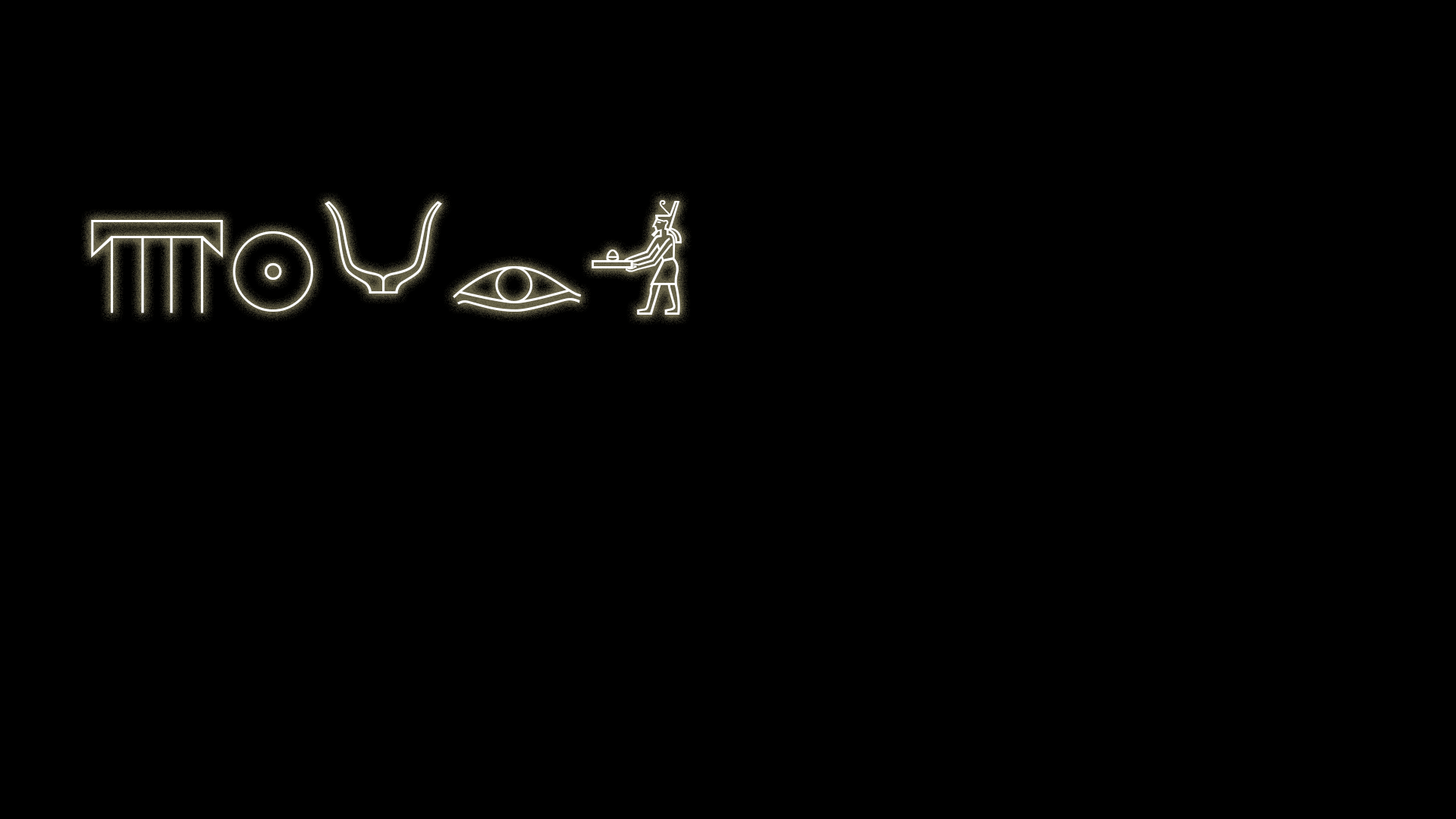
<style>
.page{position:relative;width:1456px;height:819px;background:#000000}
.page>*{position:absolute;margin:0}
.t1{font:113.7px "NotoSansEgyptianHieroglyphs-Regular";color:#ffffff}
</style>
<div class="page">
<p class="t1" style="left:91px;top:200px;width:591px;height:115px">𓇲𓇳𓄋𓁼𓁂</p>
</div>
